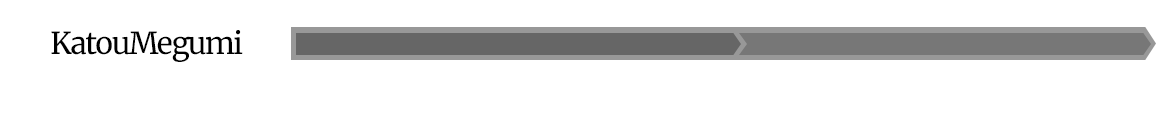
<style>
.page{position:relative;width:1165px;height:129px;background:#ffffff}
.page>*{position:absolute;margin:0}
.t1{font:30px "Merriweather-Regular";letter-spacing:-0.06em;color:#000000}
</style>
<div class="page">
<p class="t1" style="left:51px;top:30px;width:192px;height:32px">KatouMegumi</p>
</div>
